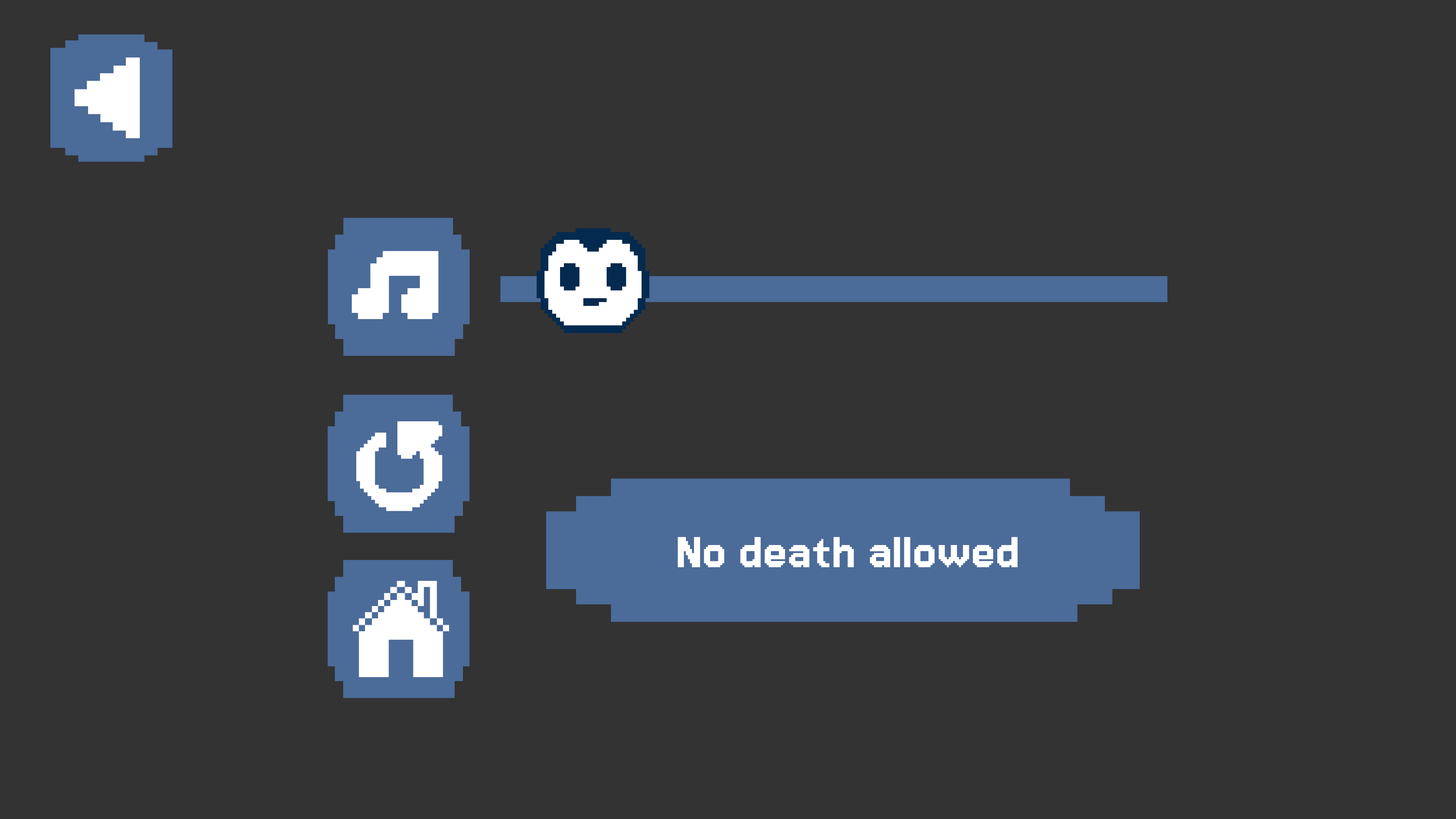
<style>
.page{position:relative;width:1456px;height:819px;background:#333333}
.page>*{position:absolute;margin:0}
.t1{font:54.6px "Jersey15-Regular";color:#ffffff}
</style>
<div class="page">
<p class="t1" style="left:678px;top:537px;width:340px;height:30px">No death allowed</p>
</div>
